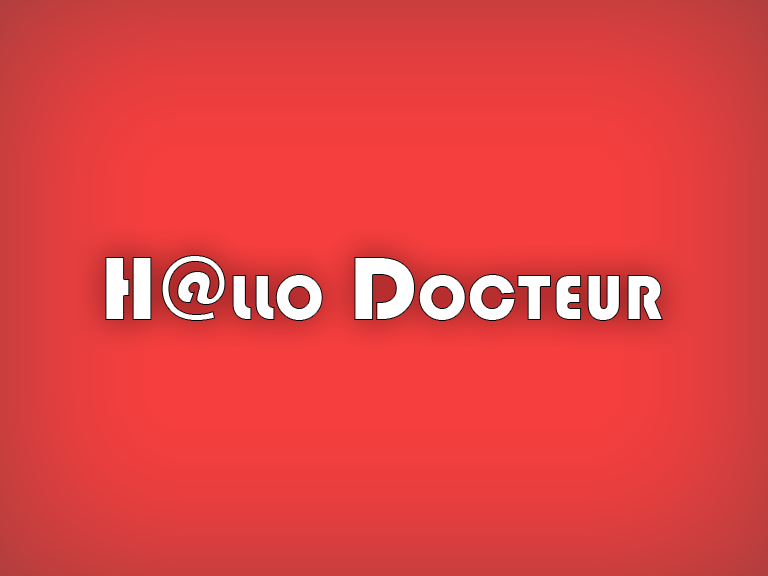
<style>
.page{position:relative;width:768px;height:576px}
.page>*{position:absolute;margin:0}
.t1{font:95px "Bauhaus93";color:#ffffff;font-variant:small-caps}
</style>
<div class="page">
<p class="t1" style="left:105px;top:255px;width:558px;height:66px">H@llo Docteur</p>
</div>
